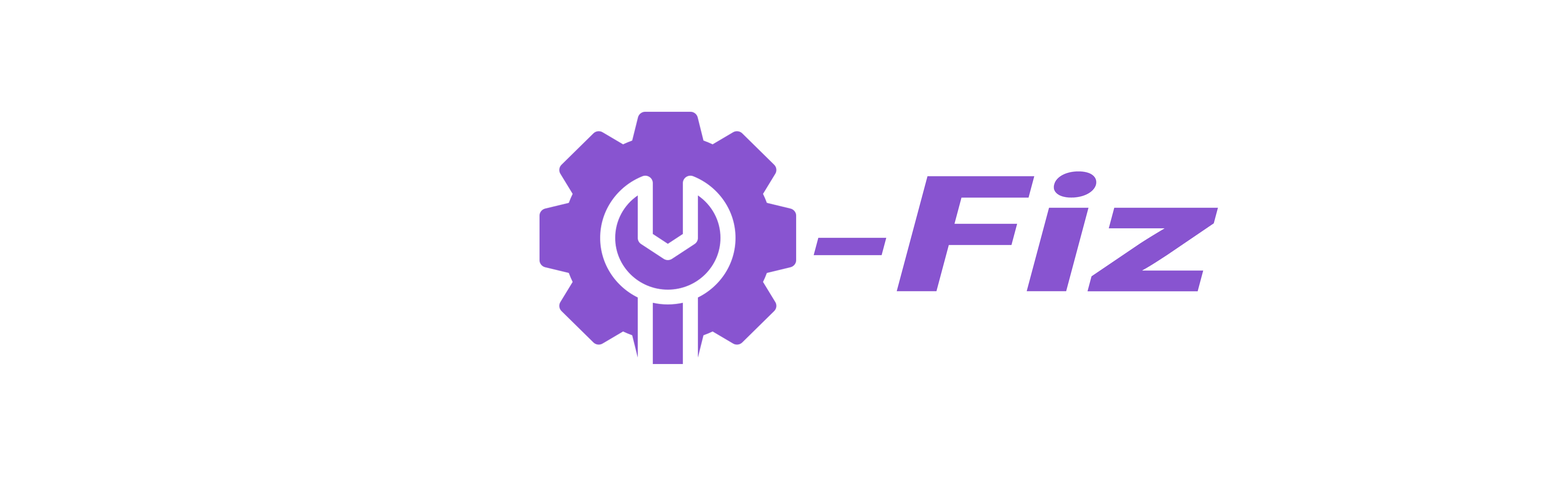
<style>
.page{position:relative;width:1568px;height:502px;background:#ffffff}
.page>*{position:absolute;margin:0}
.t1{font:170.6px "MyriadPro-Bold";color:#8854d0;font-style:italic;scale:1.52 1}
</style>
<div class="page">
<p class="t1" style="left:814px;top:171px;width:404px;height:120px">-Fiz</p>
</div>
